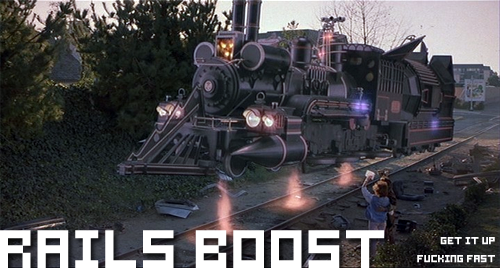
<style>
.page{position:relative;width:500px;height:268px}
.page>*{position:absolute;margin:0}
.t1{font:60px "Samson";letter-spacing:-0.025em;color:#ffffff;font-weight:bold}
.t2{font:11px/18px "Samson";letter-spacing:-0.025em;color:#ffffff;font-weight:bold}
</style>
<div class="page">
<p class="t1" style="left:0px;top:230px;width:385px;height:39px">Rails Boost</p>
<p class="t2" style="left:417px;top:237px;width:78px;height:26px;text-align:right">GET IT UP<br>FUCKING FAST</p>
</div>
